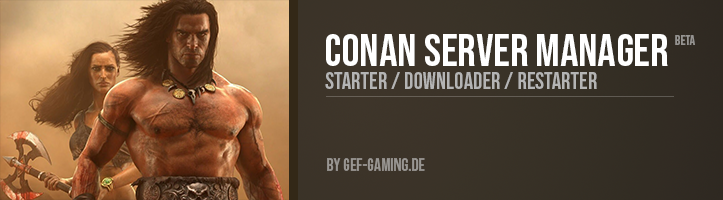
<style>
.page{position:relative;width:723px;height:200px}
.page>*{position:absolute;margin:0}
.t1{font:45.6px "BebasNeue-Regular";color:#ffffff}
.t2{font:13.6px "BebasNeue-Regular";color:#959391}
.t3{font:23.6px "BebasNeue-Regular";color:#b4b4b4}
.t4{font:17.6px "BebasNeue-Regular";color:#999692}
</style>
<div class="page">
<p class="t1" style="left:326px;top:34px;width:342px;height:32px">Conan Server Manager</p>
<p class="t2" style="left:675px;top:35px;width:20px;height:10px">beta</p>
<p class="t3" style="left:325px;top:72px;width:272px;height:17px">starter / Downloader / restarter</p>
<p class="t4" style="left:327px;top:158px;width:98px;height:13px">by GEF-GAMING.dE</p>
</div>
